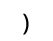
<style>
.page{position:relative;width:53px;height:41px;background:#ffffff}
.page>*{position:absolute;margin:0}
.t1{font:23.7px "DroidSans";color:#000000}
</style>
<div class="page">
<p class="t1" style="left:23px;top:13px;width:6px;height:22px">)</p>
</div>
